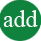
<style>
.page{position:relative;width:41px;height:41px;background:#0f823d}
.page>*{position:absolute;margin:0}
.t1{font:24px "TimesNewRomanPSMT";color:#fbfafa}
</style>
<div class="page">
<p class="t1" style="left:3px;top:10px;width:35px;height:17px">add</p>
</div>
